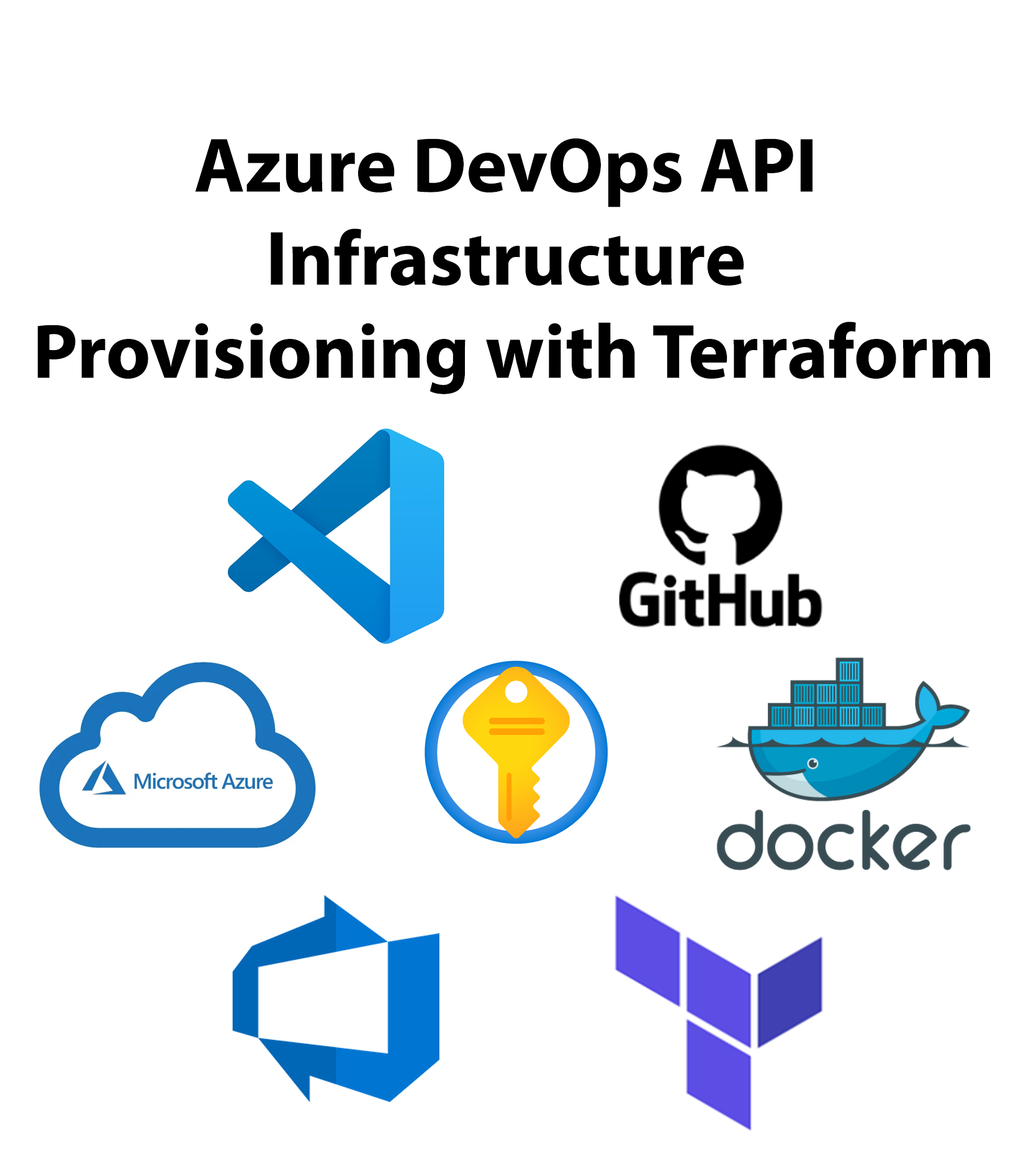
<style>
.page{position:relative;width:1031px;height:1157px;background:#ffffff}
.page>*{position:absolute;margin:0}
.t1{font:77.6px "MyriadConceptRoman-Bold";color:#000000}
</style>
<div class="page">
<p class="t1" style="left:37px;top:138px;width:953px;height:256px;text-align:center">Azure DevOps API <br>Infrastructure <br>Provisioning with Terraform</p>
</div>
